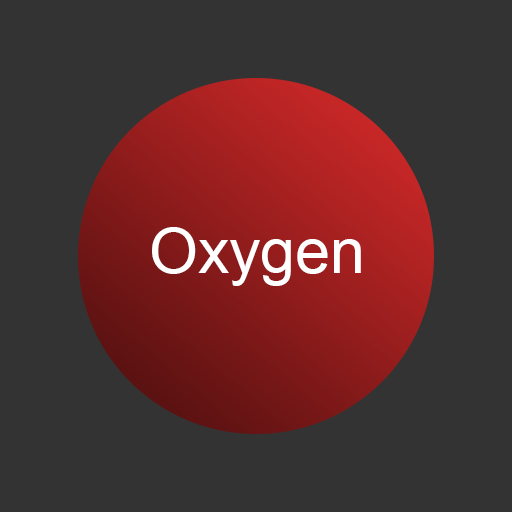
<style>
.page{position:relative;width:512px;height:512px;background:#333333}
.page>*{position:absolute;margin:0}
.t1{font:62.5px "ArialMT";color:#ffffff}
</style>
<div class="page">
<p class="t1" style="left:152px;top:227px;width:209px;height:59px">Oxygen</p>
</div>
